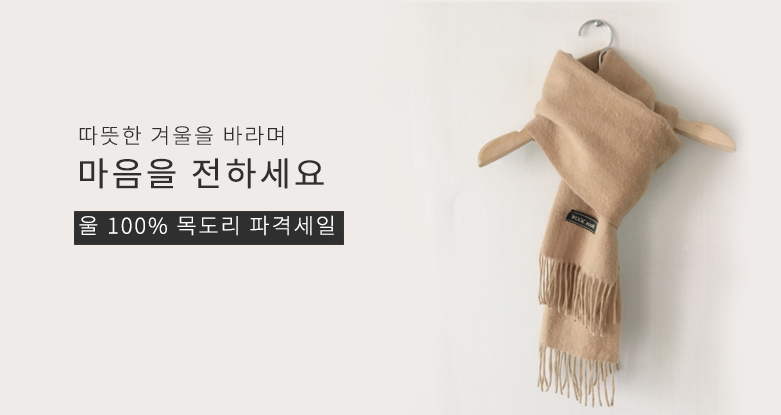
<style>
.page{position:relative;width:781px;height:415px;background:#efebe8}
.page>*{position:absolute;margin:0}
.t1{font:21.3px "NotoSansCJKkr-Light";letter-spacing:0.085em;color:#2f2f2f}
.t2{font:33.5px "NotoSansCJKkr-Regular";letter-spacing:0.085em;color:#2f2f2f}
.t3{font:21.4px "NotoSansCJKkr-Light";letter-spacing:0.085em;color:#ffffff}
</style>
<div class="page">
<p class="t1" style="left:79px;top:126px;width:205px;height:20px">따뜻한 겨울을 바라며</p>
<p class="t2" style="left:80px;top:158px;width:244px;height:31px">마음을 전하세요</p>
<p class="t3" style="left:79px;top:215px;width:255px;height:21px">울 100% 목도리 파격세일</p>
</div>
